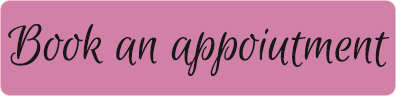
<style>
.page{position:relative;width:396px;height:96px;background:#d181a7}
.page>*{position:absolute;margin:0}
.t1{font:58.3px "EuphoriaScript-Regular";color:#181818}
</style>
<div class="page">
<p class="t1" style="left:8px;top:24px;width:382px;height:52px">Book an appoiutment</p>
</div>
